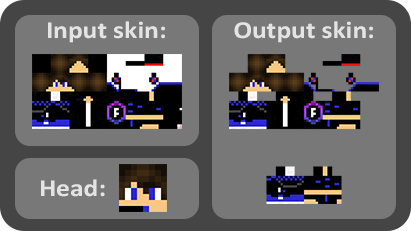
<style>
.page{position:relative;width:411px;height:231px;background:#787878}
.page>*{position:absolute;margin:0}
.t1{font:24.5px "Calibri-Bold";color:#e4e4e4;scale:1.12 1}
</style>
<div class="page">
<p class="t1" style="left:48px;top:21px;width:117px;height:22px">Input skin:</p>
<p class="t1" style="left:234px;top:21px;width:139px;height:22px">Output skin:</p>
<p class="t1" style="left:41px;top:179px;width:64px;height:18px">Head:</p>
</div>
